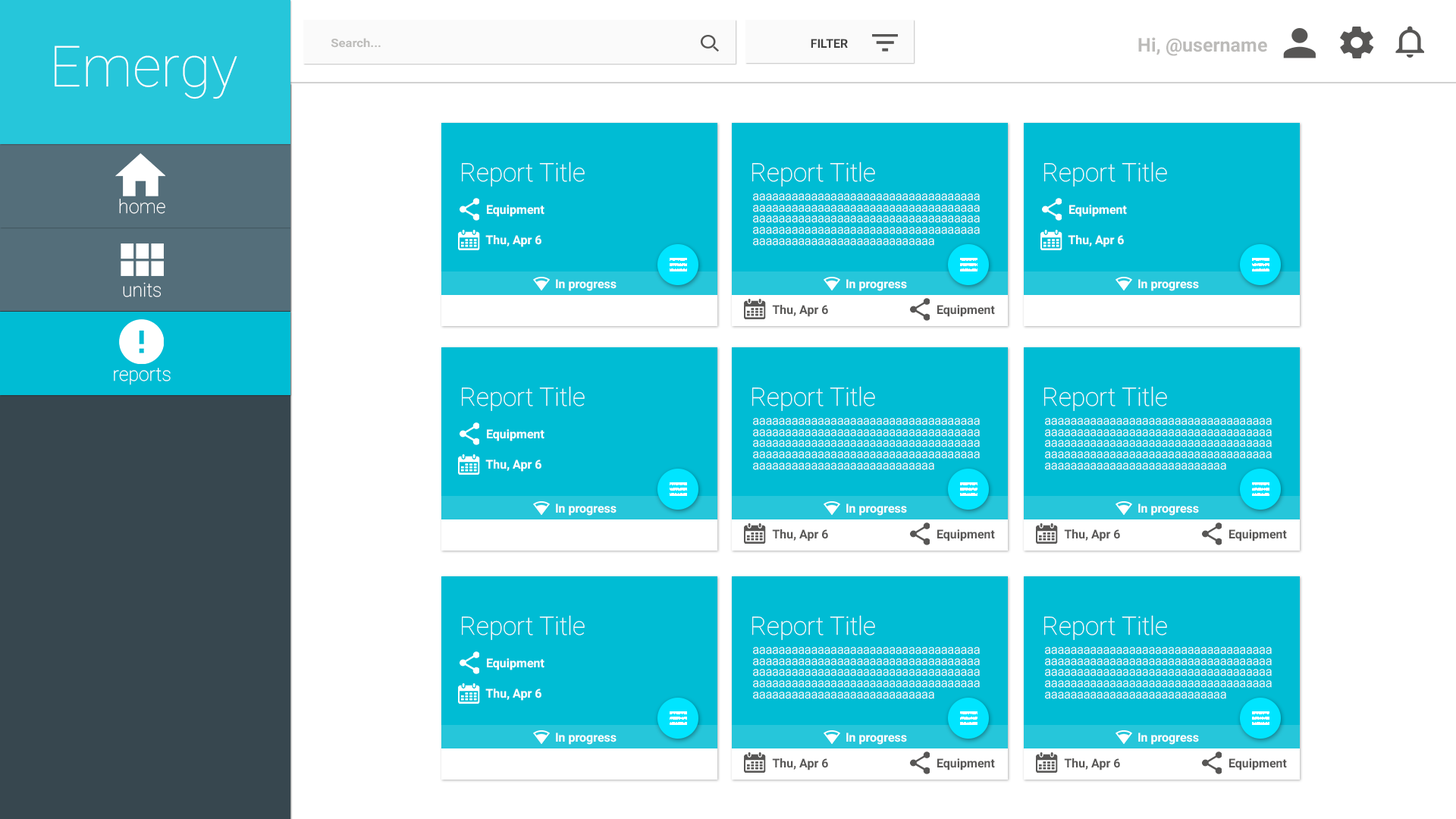
<style>
.page{position:relative;width:1456px;height:819px;background:#ffffff}
.page>*{position:absolute;margin:0}
.t1{font:11.6px "Roboto-Bold";color:#bcbbb9;scale:1.09 1}
.t2{font:12.1px "Roboto-Bold";color:#424242}
.t3{font:19px "Roboto-Bold";color:#bcbbb9}
.t4{font:56.9px "Roboto-Thin";color:#ffffff}
.t5{font:25.3px "Roboto-Thin";color:#fefefe}
.t6{font:12.1px/2.2px "Roboto-Light";color:#ffffff}
.t7{font:19px "Roboto-Thin";color:#ffffff}
.t8{font:12.1px "Roboto-Bold";color:#fefefe}
.t9{font:12.1px "Roboto-Bold";color:#575655}
</style>
<div class="page">
<p class="t1" style="left:331px;top:38px;width:50px;height:10px">Search...</p>
<p class="t2" style="left:811px;top:39px;width:37px;height:9px">FILTER</p>
<p class="t3" style="left:1138px;top:37px;width:129px;height:19px">Hi, @username</p>
<p class="t4" style="left:55px;top:45px;width:182px;height:54px">Emergy</p>
<p class="t5" style="left:462px;top:162px;width:123px;height:25px">Report Title</p>
<p class="t5" style="left:752px;top:162px;width:123px;height:25px">Report Title</p>
<p class="t5" style="left:1044px;top:162px;width:123px;height:25px">Report Title</p>
<p class="t6" style="left:753px;top:193px;width:227px;height:53px">aaaaaaaaaaaaaaaaaaaaaaaaaaaaaaaaaaa<br><br><br><br><br>aaaaaaaaaaaaaaaaaaaaaaaaaaaaaaaaaaa<br><br><br><br><br>aaaaaaaaaaaaaaaaaaaaaaaaaaaaaaaaaaa<br><br><br><br><br>aaaaaaaaaaaaaaaaaaaaaaaaaaaaaaaaaaa<br><br><br><br><br>aaaaaaaaaaaaaaaaaaaaaaaaaaaa</p>
<p class="t7" style="left:119px;top:199px;width:46px;height:15px">home</p>
<p class="t8" style="left:487px;top:205px;width:57px;height:12px">Equipment</p>
<p class="t8" style="left:1069px;top:205px;width:58px;height:12px">Equipment</p>
<p class="t8" style="left:485px;top:235px;width:56px;height:12px">Thu, Apr 6</p>
<p class="t8" style="left:1068px;top:235px;width:56px;height:12px">Thu, Apr 6</p>
<p class="t8" style="left:556px;top:279px;width:61px;height:12px">In progress</p>
<p class="t8" style="left:846px;top:279px;width:61px;height:12px">In progress</p>
<p class="t8" style="left:1138px;top:279px;width:61px;height:12px">In progress</p>
<p class="t7" style="left:123px;top:282px;width:38px;height:15px">units</p>
<p class="t9" style="left:772px;top:305px;width:56px;height:12px">Thu, Apr 6</p>
<p class="t9" style="left:937px;top:305px;width:58px;height:12px">Equipment</p>
<p class="t7" style="left:114px;top:368px;width:57px;height:17px">reports</p>
<p class="t5" style="left:462px;top:386px;width:123px;height:25px">Report Title</p>
<p class="t5" style="left:752px;top:386px;width:123px;height:25px">Report Title</p>
<p class="t5" style="left:1044px;top:386px;width:123px;height:25px">Report Title</p>
<p class="t6" style="left:753px;top:418px;width:227px;height:52px">aaaaaaaaaaaaaaaaaaaaaaaaaaaaaaaaaaa<br><br><br><br><br>aaaaaaaaaaaaaaaaaaaaaaaaaaaaaaaaaaa<br><br><br><br><br>aaaaaaaaaaaaaaaaaaaaaaaaaaaaaaaaaaa<br><br><br><br><br>aaaaaaaaaaaaaaaaaaaaaaaaaaaaaaaaaaa<br><br><br><br><br>aaaaaaaaaaaaaaaaaaaaaaaaaaaa</p>
<p class="t6" style="left:1045px;top:418px;width:227px;height:52px">aaaaaaaaaaaaaaaaaaaaaaaaaaaaaaaaaaa<br><br><br><br><br>aaaaaaaaaaaaaaaaaaaaaaaaaaaaaaaaaaa<br><br><br><br><br>aaaaaaaaaaaaaaaaaaaaaaaaaaaaaaaaaaa<br><br><br><br><br>aaaaaaaaaaaaaaaaaaaaaaaaaaaaaaaaaaa<br><br><br><br><br>aaaaaaaaaaaaaaaaaaaaaaaaaaaa</p>
<p class="t8" style="left:487px;top:429px;width:57px;height:12px">Equipment</p>
<p class="t8" style="left:485px;top:460px;width:56px;height:12px">Thu, Apr 6</p>
<p class="t8" style="left:556px;top:504px;width:61px;height:12px">In progress</p>
<p class="t8" style="left:846px;top:504px;width:61px;height:12px">In progress</p>
<p class="t8" style="left:1138px;top:504px;width:61px;height:12px">In progress</p>
<p class="t9" style="left:772px;top:529px;width:56px;height:12px">Thu, Apr 6</p>
<p class="t9" style="left:937px;top:529px;width:58px;height:12px">Equipment</p>
<p class="t9" style="left:1064px;top:529px;width:56px;height:12px">Thu, Apr 6</p>
<p class="t9" style="left:1229px;top:529px;width:58px;height:12px">Equipment</p>
<p class="t5" style="left:462px;top:615px;width:123px;height:25px">Report Title</p>
<p class="t5" style="left:752px;top:615px;width:123px;height:25px">Report Title</p>
<p class="t5" style="left:1044px;top:615px;width:123px;height:25px">Report Title</p>
<p class="t6" style="left:753px;top:647px;width:227px;height:52px">aaaaaaaaaaaaaaaaaaaaaaaaaaaaaaaaaaa<br><br><br><br><br>aaaaaaaaaaaaaaaaaaaaaaaaaaaaaaaaaaa<br><br><br><br><br>aaaaaaaaaaaaaaaaaaaaaaaaaaaaaaaaaaa<br><br><br><br><br>aaaaaaaaaaaaaaaaaaaaaaaaaaaaaaaaaaa<br><br><br><br><br>aaaaaaaaaaaaaaaaaaaaaaaaaaaa</p>
<p class="t6" style="left:1045px;top:647px;width:227px;height:52px">aaaaaaaaaaaaaaaaaaaaaaaaaaaaaaaaaaa<br><br><br><br><br>aaaaaaaaaaaaaaaaaaaaaaaaaaaaaaaaaaa<br><br><br><br><br>aaaaaaaaaaaaaaaaaaaaaaaaaaaaaaaaaaa<br><br><br><br><br>aaaaaaaaaaaaaaaaaaaaaaaaaaaaaaaaaaa<br><br><br><br><br>aaaaaaaaaaaaaaaaaaaaaaaaaaaa</p>
<p class="t8" style="left:487px;top:658px;width:57px;height:12px">Equipment</p>
<p class="t8" style="left:485px;top:689px;width:56px;height:12px">Thu, Apr 6</p>
<p class="t8" style="left:556px;top:733px;width:61px;height:12px">In progress</p>
<p class="t8" style="left:846px;top:733px;width:61px;height:12px">In progress</p>
<p class="t8" style="left:1138px;top:733px;width:61px;height:12px">In progress</p>
<p class="t9" style="left:772px;top:758px;width:56px;height:12px">Thu, Apr 6</p>
<p class="t9" style="left:937px;top:758px;width:58px;height:12px">Equipment</p>
<p class="t9" style="left:1064px;top:758px;width:56px;height:12px">Thu, Apr 6</p>
<p class="t9" style="left:1229px;top:758px;width:58px;height:12px">Equipment</p>
</div>
